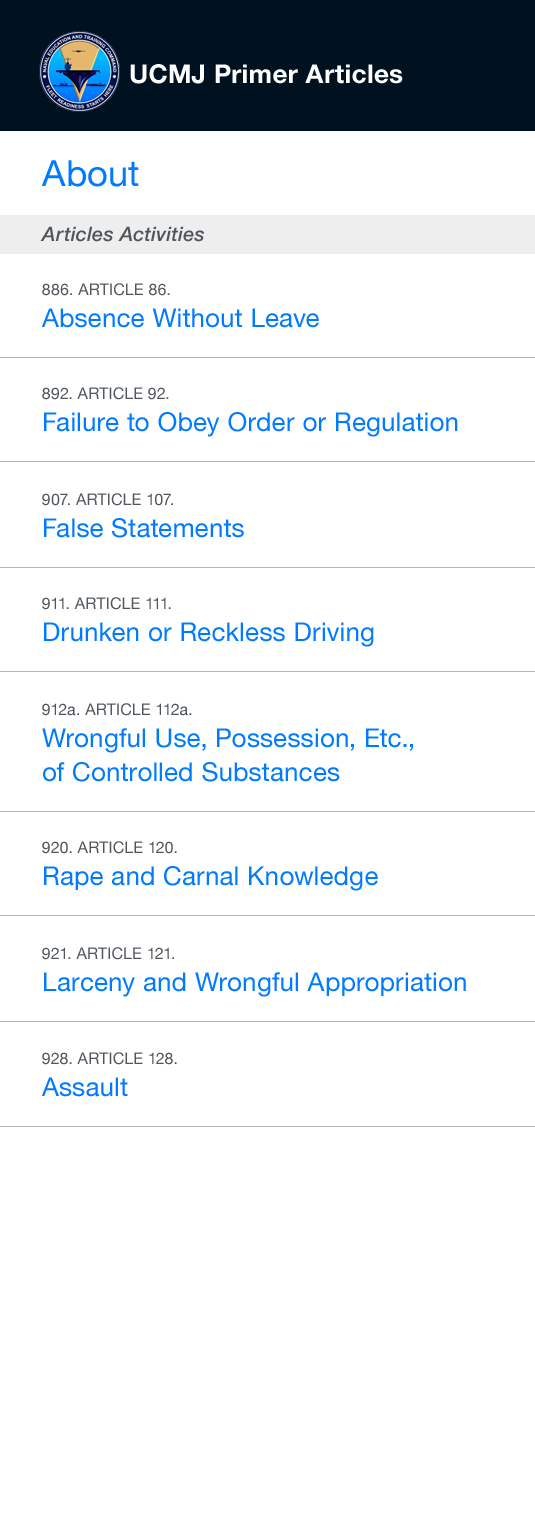
<style>
.page{position:relative;width:535px;height:1536px;background:#ffffff}
.page>*{position:absolute;margin:0}
.t1{font:26px "HelveticaNeue-Bold";letter-spacing:0.01em;color:#ffffff}
.t2{font:36px "HelveticaNeue";letter-spacing:0.01em;color:#007aff}
.t3{font:20px "HelveticaNeue-MediumItalic";letter-spacing:0.01em;color:#50565b}
.t4{font:16px "HelveticaNeue";letter-spacing:0.01em;color:#50565b}
.t5{font:26px "HelveticaNeue";letter-spacing:0.01em;color:#007aff}
.t6{font:26px/34px "HelveticaNeue";letter-spacing:0.01em;color:#007aff}
</style>
<div class="page">
<p class="t1" style="left:130px;top:64px;width:273px;height:20px">UCMJ Primer Articles</p>
<p class="t2" style="left:41px;top:160px;width:98px;height:27px">About</p>
<p class="t3" style="left:40px;top:226px;width:164px;height:16px">Articles Activities</p>
<p class="t4" style="left:42px;top:283px;width:128px;height:13px">886. ARTICLE 86.</p>
<p class="t5" style="left:41px;top:308px;width:278px;height:20px">Absence Without Leave</p>
<p class="t4" style="left:42px;top:387px;width:127px;height:13px">892. ARTICLE 92.</p>
<p class="t5" style="left:44px;top:412px;width:414px;height:25px">Failure to Obey Order or Regulation</p>
<p class="t4" style="left:42px;top:493px;width:131px;height:13px">907. ARTICLE 107.</p>
<p class="t5" style="left:44px;top:518px;width:200px;height:20px">False Statements</p>
<p class="t4" style="left:42px;top:597px;width:129px;height:13px">911. ARTICLE 111.</p>
<p class="t5" style="left:44px;top:622px;width:330px;height:25px">Drunken or Reckless Driving</p>
<p class="t4" style="left:42px;top:703px;width:150px;height:13px">912a. ARTICLE 112a.</p>
<p class="t6" style="left:42px;top:728px;width:371px;height:54px">Wrongful Use, Possession, Etc., <br>of Controlled Substances</p>
<p class="t4" style="left:42px;top:841px;width:135px;height:13px">920. ARTICLE 120.</p>
<p class="t5" style="left:44px;top:866px;width:334px;height:25px">Rape and Carnal Knowledge</p>
<p class="t4" style="left:42px;top:947px;width:132px;height:13px">921. ARTICLE 121.</p>
<p class="t5" style="left:44px;top:972px;width:422px;height:25px">Larceny and Wrongful Appropriation</p>
<p class="t4" style="left:42px;top:1052px;width:135px;height:13px">928. ARTICLE 128.</p>
<p class="t5" style="left:41px;top:1077px;width:87px;height:20px">Assault</p>
</div>
